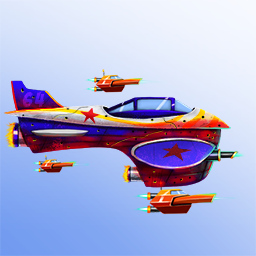
<style>
.page{position:relative;width:256px;height:256px}
.page>*{position:absolute;margin:0}
.t1{font:20.3px "BadaBoomBB";letter-spacing:0.12em}
</style>
<div class="page">
<p class="t1" style="left:22px;top:92px;width:23px;height:15px">64</p>
</div>
